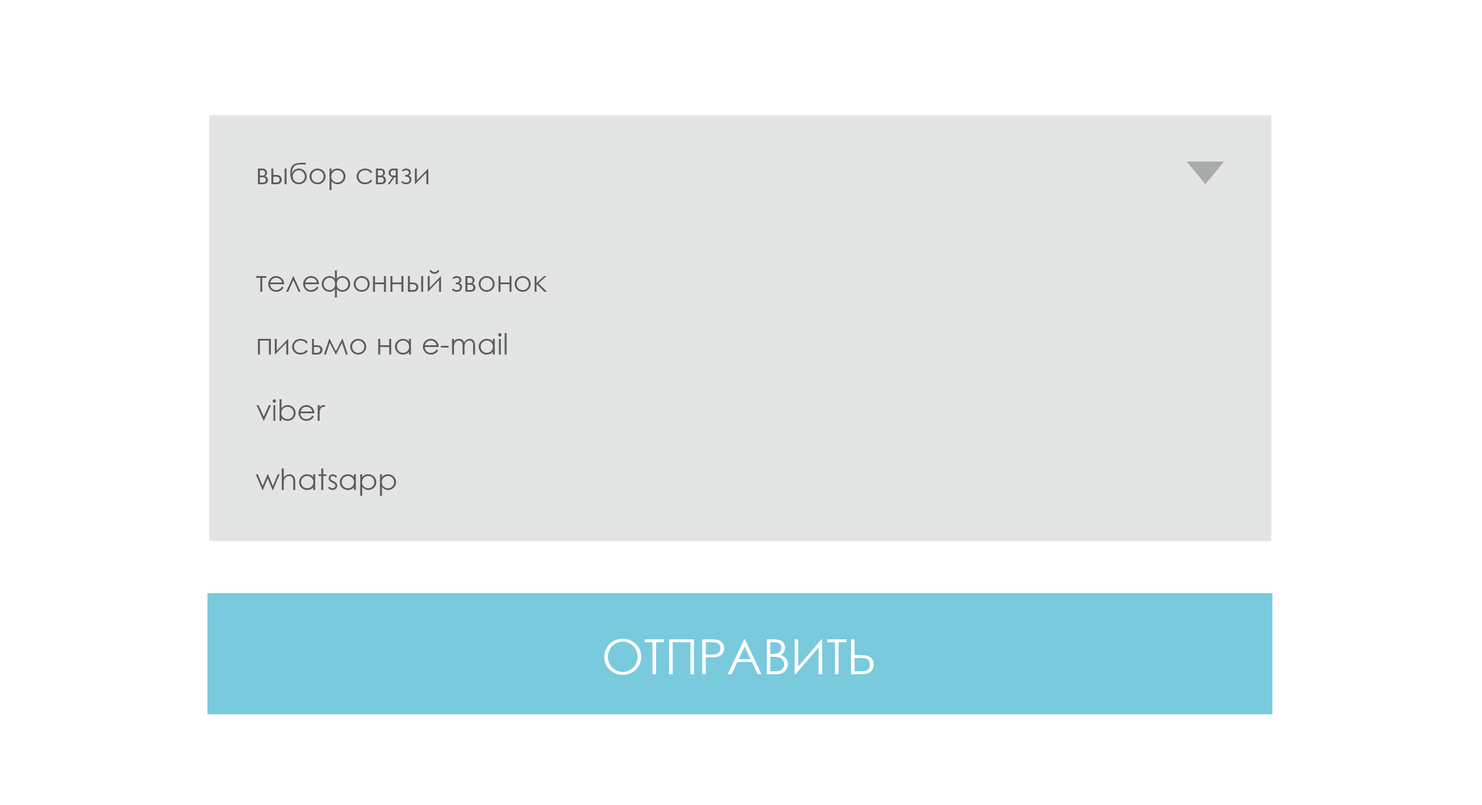
<style>
.page{position:relative;width:1482px;height:805px;background:#ffffff}
.page>*{position:absolute;margin:0}
.t1{font:29.1px "CenturyGothic";color:#5d5d5d}
.t2{font:48.5px "CenturyGothic";color:#ffffff}
</style>
<div class="page">
<p class="t1" style="left:257px;top:163px;width:171px;height:27px">выбор связи</p>
<p class="t1" style="left:256px;top:270px;width:291px;height:28px">телефонный звонок</p>
<p class="t1" style="left:257px;top:333px;width:250px;height:21px">письмо на e-mail</p>
<p class="t1" style="left:256px;top:399px;width:69px;height:22px">viber</p>
<p class="t1" style="left:256px;top:468px;width:140px;height:28px">whatsapp</p>
<p class="t2" style="left:604px;top:639px;width:270px;height:36px">ОТПРАВИТЬ</p>
</div>
